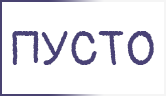
<style>
.page{position:relative;width:166px;height:96px;background:#ffffff}
.page>*{position:absolute;margin:0}
.t1{font:48px "Pangolin-Regular";color:#494276;text-transform:uppercase}
</style>
<div class="page">
<p class="t1" style="left:12px;top:31px;width:142px;height:34px">Пусто</p>
</div>
